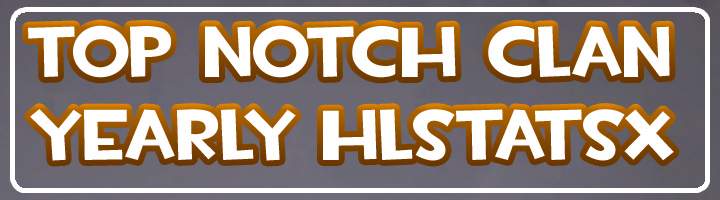
<style>
.page{position:relative;width:720px;height:200px}
.page>*{position:absolute;margin:0}
.t1{font:72px "TF2Build";color:#fefefe;scale:1.05 1}
</style>
<div class="page">
<p class="t1" style="left:28px;top:25px;width:642px;height:53px">top notch clan</p>
<p class="t1" style="left:30px;top:109px;width:644px;height:52px">yearly Hlstatsx</p>
</div>
